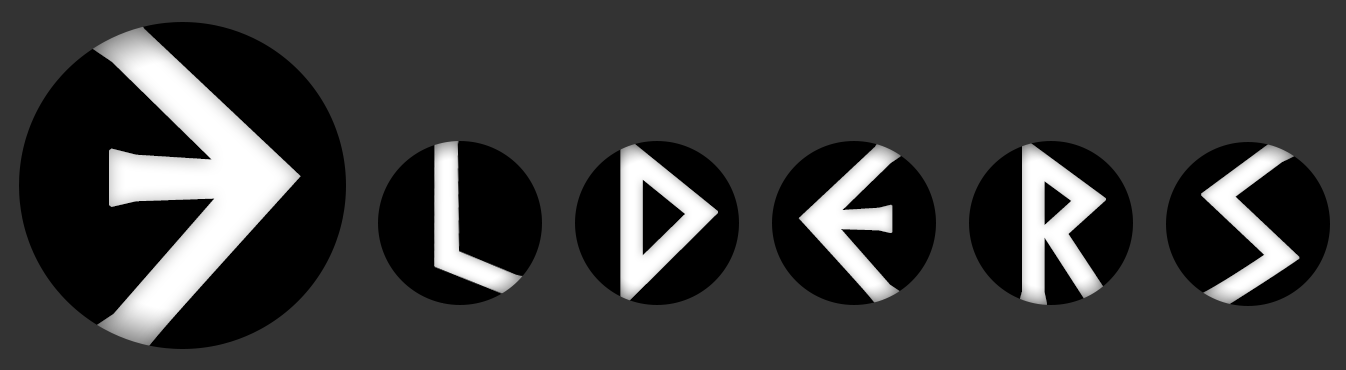
<style>
.page{position:relative;width:1346px;height:370px;background:#333333}
.page>*{position:absolute;margin:0}
.t1{font:475.4px "DSGreece";letter-spacing:-0.02em;color:#ffffff;text-transform:uppercase;font-weight:bold}
.t2{font:230px "DSGreece";letter-spacing:-0.02em;color:#ffffff;text-transform:uppercase;font-weight:bold}
</style>
<div class="page">
<p class="t1" style="left:91px;top:8px;width:210px;height:359px;rotate:180deg">e</p>
<p class="t2" style="left:620px;top:133px;width:98px;height:175px">d</p>
<p class="t2" style="left:798px;top:137px;width:103px;height:174px">e</p>
<p class="t2" style="left:1198px;top:136px;width:102px;height:179px">S</p>
<p class="t2" style="left:1018px;top:138px;width:95px;height:177px;rotate:2deg">R</p>
</div>
